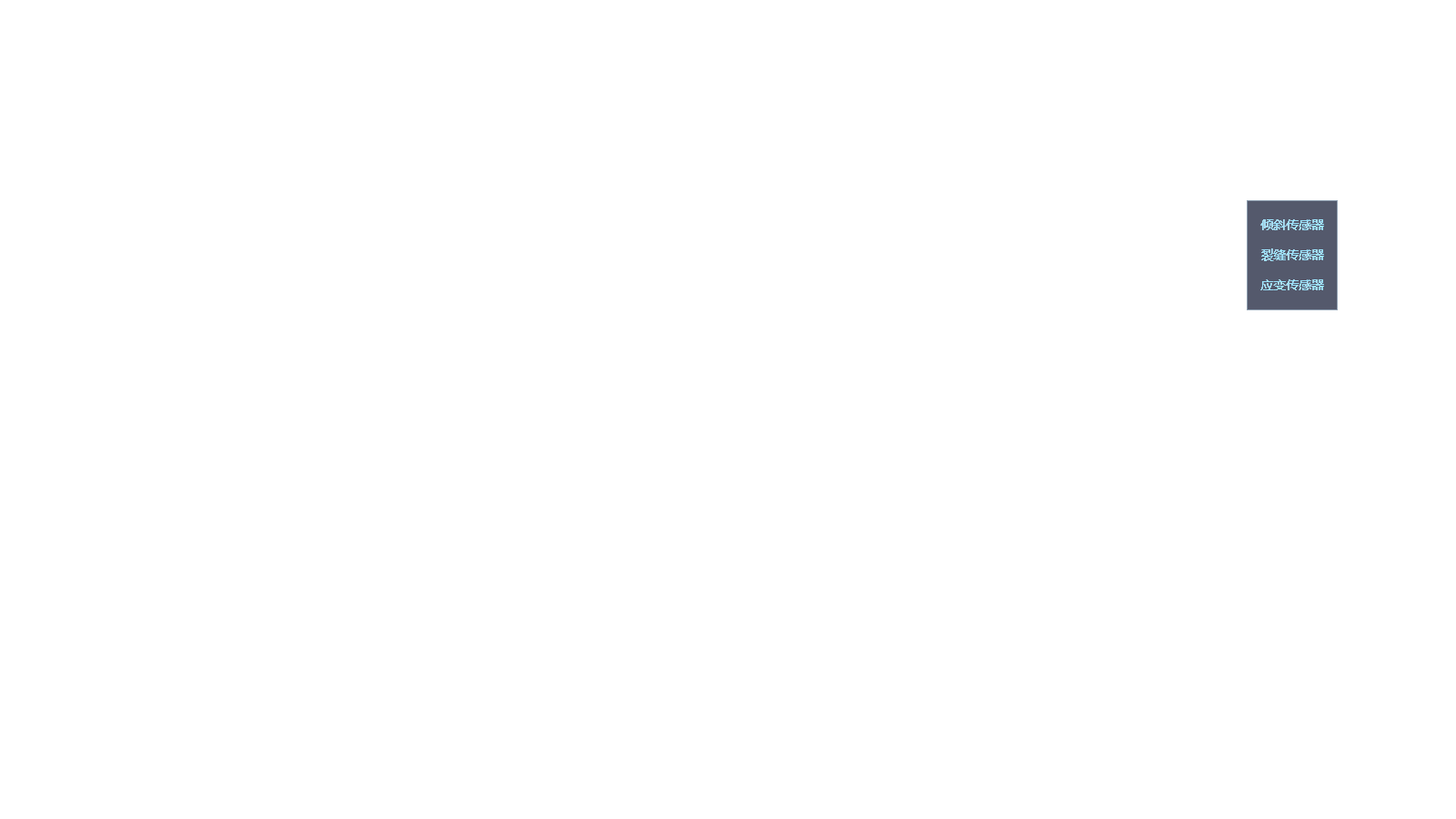
<style>
.page{position:relative;width:1456px;height:819px;background:#ffffff}
.page>*{position:absolute;margin:0}
.t1{font:12.7px "MicrosoftYaHei";color:#9ae4ff}
</style>
<div class="page">
<p class="t1" style="left:1260px;top:219px;width:64px;height:11px">倾斜传感器</p>
<p class="t1" style="left:1260px;top:219px;width:64px;height:11px">倾斜传感器</p>
<p class="t1" style="left:1261px;top:248px;width:63px;height:13px">裂缝传感器</p>
<p class="t1" style="left:1261px;top:248px;width:63px;height:13px">裂缝传感器</p>
<p class="t1" style="left:1260px;top:279px;width:64px;height:11px">应变传感器</p>
<p class="t1" style="left:1260px;top:279px;width:64px;height:11px">应变传感器</p>
</div>
